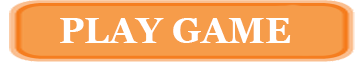
<style>
.page{position:relative;width:360px;height:64px;background:#f69c4a}
.page>*{position:absolute;margin:0}
.t1{font:36px "Georgia-Bold";color:#ffffff}
</style>
<div class="page">
<p class="t1" style="left:60px;top:18px;width:231px;height:25px">PLAY GAME</p>
</div>
